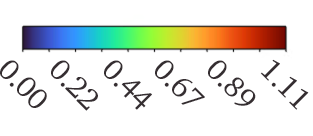
<style>
.page{position:relative;width:313px;height:136px;background:#ffffff}
.page>*{position:absolute;margin:0}
.t1{font:30px "Charter-Roman";letter-spacing:-0.02em;color:#352e31}
</style>
<div class="page">
<p class="t1" style="left:0px;top:60px;width:47px;height:48px;rotate:45deg">0.00</p>
<p class="t1" style="left:51px;top:60px;width:47px;height:51px;rotate:45deg">0.22</p>
<p class="t1" style="left:104px;top:60px;width:48px;height:50px;rotate:45deg">0.44</p>
<p class="t1" style="left:155px;top:60px;width:50px;height:45px;rotate:45deg">0.67</p>
<p class="t1" style="left:208px;top:60px;width:48px;height:46px;rotate:45deg">0.89</p>
<p class="t1" style="left:260px;top:59px;width:49px;height:51px;rotate:45deg">1.11</p>
</div>
